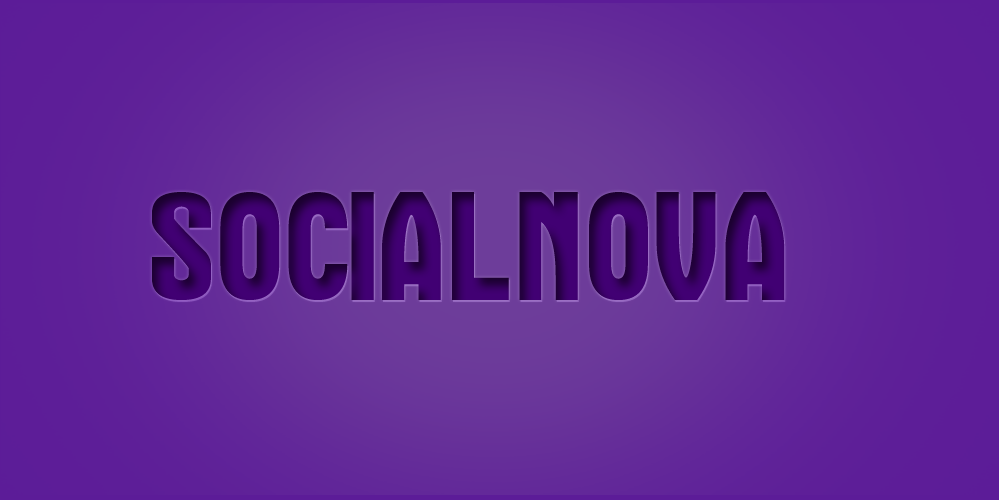
<style>
.page{position:relative;width:999px;height:500px}
.page>*{position:absolute;margin:0}
.t1{font:150px "DynastyMT";letter-spacing:-0.025em;color:#3c006a;text-transform:uppercase}
</style>
<div class="page">
<p class="t1" style="left:152px;top:192px;width:633px;height:108px">Socialnova</p>
</div>
